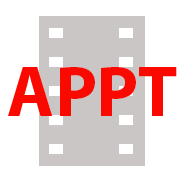
<style>
.page{position:relative;width:182px;height:182px;background:#ffffff}
.page>*{position:absolute;margin:0}
.t1{font:72px "MyriadPro-Bold";color:#fa0900}
</style>
<div class="page">
<p class="t1" style="left:8px;top:67px;width:169px;height:49px">APPT</p>
</div>
